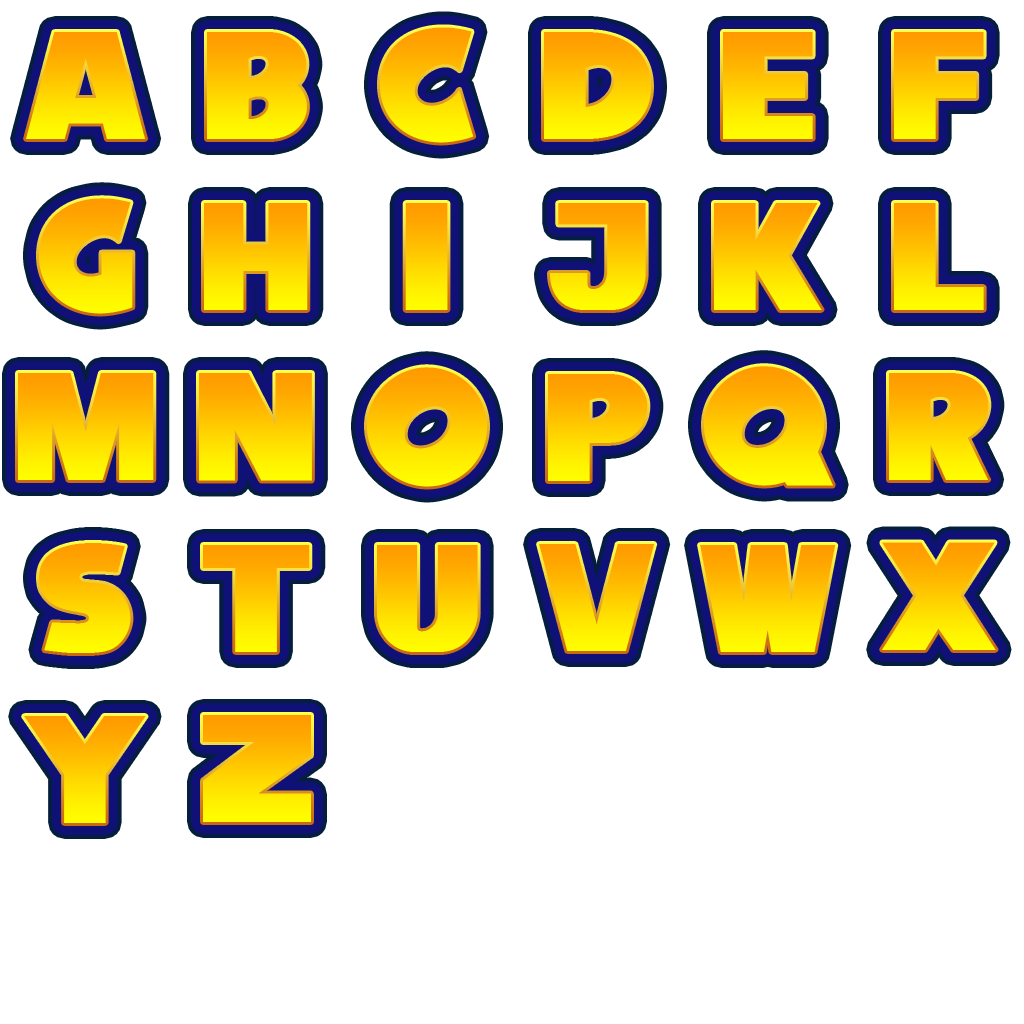
<style>
.page{position:relative;width:1024px;height:1024px;background:#ffffff}
.page>*{position:absolute;margin:0}
.t1{font:54.2px "SonicFont"}
</style>
<div class="page">
<p class="t1" style="left:380px;top:27px;width:94px;height:116px">c</p>
<p class="t1" style="left:26px;top:32px;width:120px;height:107px">a</p>
<p class="t1" style="left:207px;top:32px;width:100px;height:107px">b</p>
<p class="t1" style="left:544px;top:32px;width:107px;height:107px">d</p>
<p class="t1" style="left:723px;top:32px;width:90px;height:107px">e</p>
<p class="t1" style="left:894px;top:32px;width:90px;height:107px">f</p>
<p class="t1" style="left:39px;top:198px;width:94px;height:116px">g</p>
<p class="t1" style="left:204px;top:203px;width:104px;height:107px">h</p>
<p class="t1" style="left:405px;top:203px;width:43px;height:107px">i</p>
<p class="t1" style="left:550px;top:203px;width:96px;height:107px">j</p>
<p class="t1" style="left:714px;top:203px;width:108px;height:107px">k</p>
<p class="t1" style="left:894px;top:203px;width:90px;height:107px">l</p>
<p class="t1" style="left:704px;top:366px;width:129px;height:120px">q</p>
<p class="t1" style="left:18px;top:373px;width:136px;height:107px">m</p>
<p class="t1" style="left:199px;top:373px;width:113px;height:108px">n</p>
<p class="t1" style="left:367px;top:367px;width:120px;height:120px">o</p>
<p class="t1" style="left:548px;top:374px;width:100px;height:107px">p</p>
<p class="t1" style="left:889px;top:373px;width:100px;height:107px">r</p>
<p class="t1" style="left:39px;top:543px;width:92px;height:110px">s</p>
<p class="t1" style="left:203px;top:545px;width:107px;height:107px">t</p>
<p class="t1" style="left:377px;top:545px;width:101px;height:107px">u</p>
<p class="t1" style="left:539px;top:544px;width:116px;height:107px">v</p>
<p class="t1" style="left:700px;top:545px;width:136px;height:107px">w</p>
<p class="t1" style="left:882px;top:542px;width:114px;height:108px">x</p>
<p class="t1" style="left:24px;top:716px;width:122px;height:107px">y</p>
<p class="t1" style="left:203px;top:715px;width:108px;height:107px">z</p>
</div>
